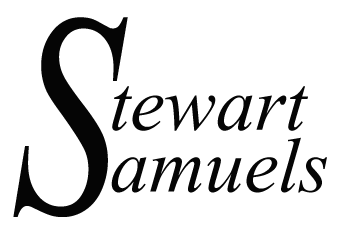
<style>
.page{position:relative;width:351px;height:236px;background:#ffffff}
.page>*{position:absolute;margin:0}
.t1{font:357.9px "Vijaya";color:#050505;scale:0.74 1}
.t2{font:96px "Vijaya";color:#050505}
</style>
<div class="page">
<p class="t1" style="left:13px;top:17px;width:115px;height:200px">S</p>
<p class="t2" style="left:112px;top:86px;width:196px;height:45px">tewart</p>
<p class="t2" style="left:111px;top:137px;width:216px;height:56px">amuels</p>
</div>
